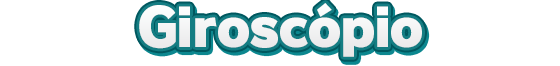
<style>
.page{position:relative;width:560px;height:66px;background:#ffffff}
.page>*{position:absolute;margin:0}
.t1{font:52px "RodinPro-UB";letter-spacing:-0.039em;color:#f1f2f2}
</style>
<div class="page">
<p class="t1" style="left:139px;top:3px;width:283px;height:54px">Giroscópio</p>
</div>
